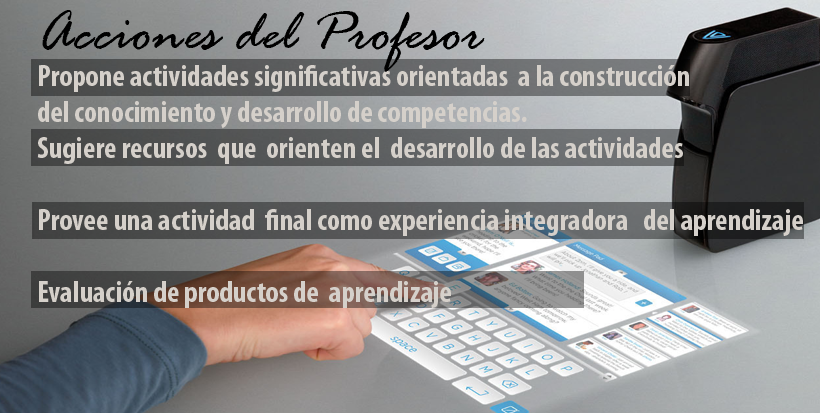
<style>
.page{position:relative;width:820px;height:413px}
.page>*{position:absolute;margin:0}
.t1{font:60px "RageItalic";color:#000000}
.t2{font:30px "MyriadPro-BoldCond";color:#d5d0ca}
</style>
<div class="page">
<p class="t1" style="left:42px;top:10px;width:443px;height:62px">Acciones del Profesor</p>
<p class="t2" style="left:37px;top:65px;width:766px;height:243px">Propone actividades significativas orientadas  a la construcción <br>del conocimiento y desarrollo de competencias.<br>Sugiere recursos  que  orienten el  desarrollo de las actividades <br><br>Provee una actividad  final como experiencia integradora   del aprendizaje<br><br>Evaluación de productos de  aprendizaje</p>
</div>
